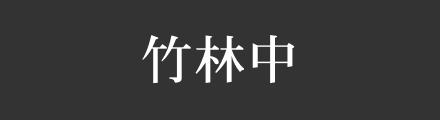
<style>
.page{position:relative;width:440px;height:120px;background:#333333}
.page>*{position:absolute;margin:0}
.t1{font:52.8px "DFHSMincho-W5-WIN-RKSJ-H";color:#ffffff}
</style>
<div class="page">
<p class="t1" style="left:142px;top:35px;width:153px;height:49px">竹林中</p>
</div>
